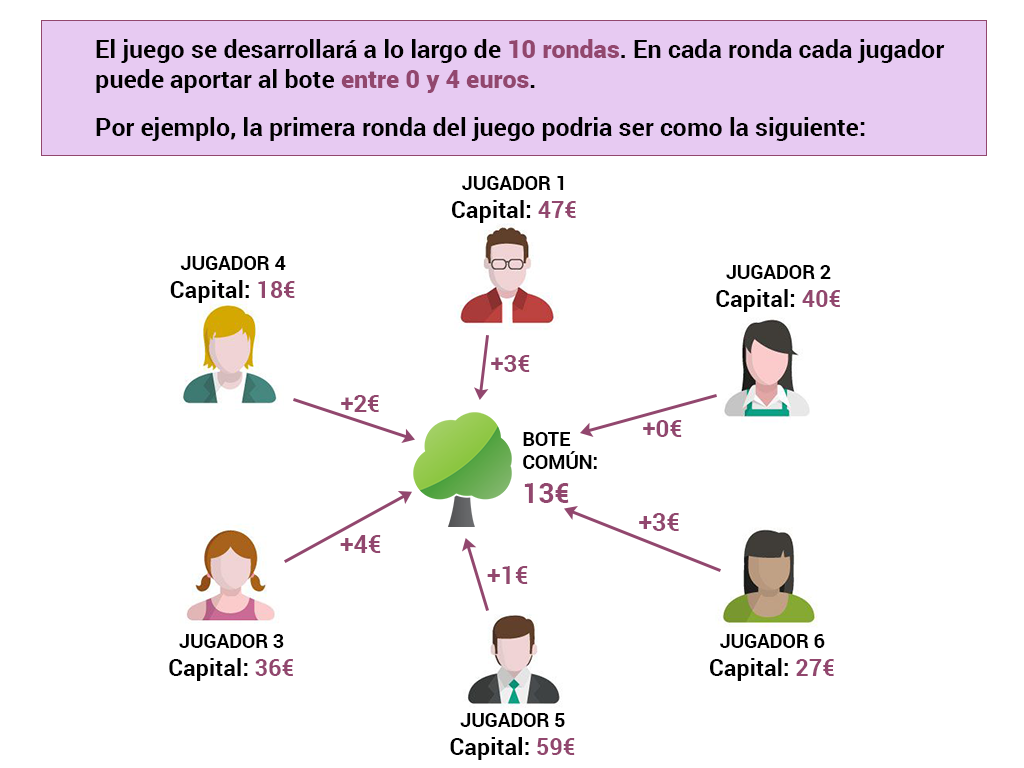
<style>
.page{position:relative;width:1024px;height:768px;background:#ffffff}
.page>*{position:absolute;margin:0}
.t1{font:25px "Roboto-Bold";color:#000000}
.t2{font:25px "Roboto-Black";color:#92476e}
.t3{font:19.5px "Roboto-Bold";color:#000000}
.t4{font:23.4px "Roboto-Bold";color:#000000}
.t5{font:23.4px "Roboto-Bold";color:#92476e}
.t6{font:24px "Roboto-Bold";color:#92476e}
.t7{font:28.1px "Roboto-Bold";color:#92476e}
.t8{font:25px "Roboto-Bold";color:#92476e}
</style>
<div class="page">
<p class="t1" style="left:96px;top:39px;width:849px;height:102px">El juego se desarrollará a lo largo de <span class="t2">10 rondas</span>. En cada ronda cada jugador<br>puede aportar al bote <span class="t2">entre 0 y 4 euros</span>. <br><br>Por ejemplo, la primera ronda del juego podria ser como la siguiente:</p>
<p class="t3" style="left:452px;top:176px;width:124px;height:47px;text-align:center">JUGADOR 1<br><span class="t4">Capital: </span><span class="t5">47€</span></p>
<p class="t3" style="left:170px;top:256px;width:125px;height:47px;text-align:center">JUGADOR 4<br><span class="t4">Capital: </span><span class="t5">18€</span></p>
<p class="t3" style="left:716px;top:265px;width:124px;height:47px;text-align:center">JUGADOR 2<br><span class="t4">Capital: </span><span class="t5">40€</span></p>
<p class="t6" style="left:491px;top:355px;width:39px;height:17px">+3€</p>
<p class="t6" style="left:341px;top:395px;width:38px;height:17px">+2€</p>
<p class="t6" style="left:643px;top:420px;width:39px;height:17px">+0€</p>
<p class="t3" style="left:523px;top:432px;width:74px;height:71px">BOTE <br>COMÚN:<br><span class="t7">13€</span></p>
<p class="t8" style="left:639px;top:513px;width:40px;height:18px">+3€</p>
<p class="t8" style="left:340px;top:535px;width:41px;height:18px">+4€</p>
<p class="t8" style="left:487px;top:566px;width:41px;height:18px">+1€</p>
<p class="t3" style="left:169px;top:634px;width:124px;height:47px;text-align:center">JUGADOR 3<br><span class="t4">Capital: </span><span class="t5">36€</span></p>
<p class="t3" style="left:710px;top:634px;width:124px;height:47px;text-align:center">JUGADOR 6<br><span class="t4">Capital: </span><span class="t5">27€</span></p>
<p class="t3" style="left:450px;top:713px;width:125px;height:47px;text-align:center">JUGADOR 5<br><span class="t4">Capital: </span><span class="t5">59€</span></p>
</div>
